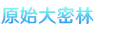
<style>
.page{position:relative;width:128px;height:32px;background:#ffffff}
.page>*{position:absolute;margin:0}
.t1{font:18.7px "HYWenHei-FEW";letter-spacing:0.025em;scale:0.97 1}
</style>
<div class="page">
<p class="t1" style="left:1px;top:6px;width:93px;height:18px">原始大密林</p>
</div>
